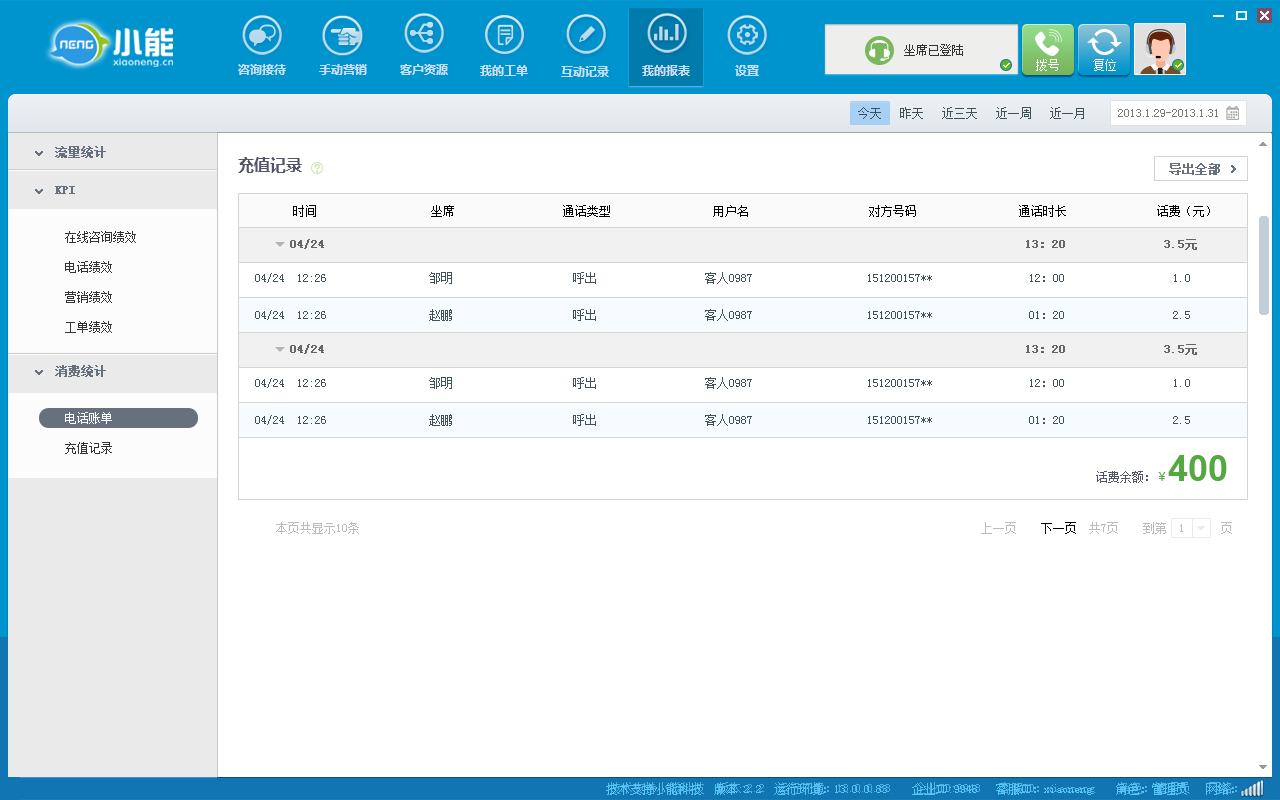
<style>
.page{position:relative;width:1280px;height:800px;background:#ffffff}
.page>*{position:absolute;margin:0}
.t1{font:12px "NSimSun";color:#333333;text-transform:uppercase}
.t2{font:12px "MicrosoftYaHei-Bold";color:#c8dff6}
.t3{font:12px "SimSun";color:#ffffff;text-transform:uppercase}
.t4{font:12px "SimSun";color:#67717d;font-weight:bold}
.t5{font:16px "MicrosoftYaHei-Bold";color:#515567}
.t6{font:12px "SimSun";color:#c9e5ab;text-transform:uppercase;font-weight:bold}
.t7{font:12px "SimSun";color:#000000}
.t8{font:12px/30px "SimSun";color:#333333}
.t9{font:12px "SimSun";color:#666666;font-weight:bold}
.t10{font:12px "SimSun";color:#405159}
.t11{font:12px "SimSun";color:#515567}
.t12{font:12px "MicrosoftYaHei";color:#53a93f}
.t13{font:36px "Arial-BoldMT";color:#53a93f}
.t14{font:12px "SimSun";color:#54c7f5}
</style>
<div class="page">
<p class="t1" style="left:904px;top:44px;width:59px;height:12px">坐席已登陆</p>
<p class="t2" style="left:238px;top:64px;width:48px;height:11px">咨询接待</p>
<p class="t2" style="left:319px;top:64px;width:48px;height:11px">手动营销</p>
<p class="t2" style="left:400px;top:64px;width:48px;height:11px">客户资源</p>
<p class="t2" style="left:480px;top:65px;width:48px;height:11px">我的工单</p>
<p class="t2" style="left:642px;top:65px;width:48px;height:11px">我的报表</p>
<p class="t2" style="left:735px;top:65px;width:24px;height:11px">设置</p>
<p class="t3" style="left:1036px;top:59px;width:23px;height:12px">拨号</p>
<p class="t3" style="left:1093px;top:59px;width:23px;height:12px">复位</p>
<p class="t2" style="left:561px;top:66px;width:48px;height:11px">互动记录</p>
<p class="t4" style="left:55px;top:146px;width:51px;height:12px">流量统计</p>
<p class="t4" style="left:55px;top:146px;width:51px;height:12px">流量统计</p>
<p class="t5" style="left:238px;top:157px;width:64px;height:16px">充值记录</p>
<p class="t6" style="left:314px;top:164px;width:6px;height:9px">?</p>
<p class="t4" style="left:1169px;top:163px;width:51px;height:12px">导出全部</p>
<p class="t4" style="left:1169px;top:163px;width:51px;height:12px">导出全部</p>
<p class="t4" style="left:55px;top:186px;width:20px;height:8px">KPI</p>
<p class="t4" style="left:55px;top:186px;width:20px;height:8px">KPI</p>
<p class="t7" style="left:293px;top:205px;width:917px;height:12px">时间                   坐席                  通话类型                 用户名                    对方号码                 通话时长               话费（元）</p>
<p class="t8" style="left:65px;top:231px;width:71px;height:102px">在线咨询绩效<br>电话绩效<br>营销绩效<br>工单绩效</p>
<p class="t8" style="left:65px;top:231px;width:71px;height:102px">在线咨询绩效<br>电话绩效<br>营销绩效<br>工单绩效</p>
<p class="t9" style="left:290px;top:239px;width:907px;height:11px">04/24                                                                                                    13：20              3.5元</p>
<p class="t10" style="left:255px;top:272px;width:935px;height:12px">04/24  12:26                 邹明                    呼出                  客人0987                   151200157**                12：00                  1.0</p>
<p class="t10" style="left:255px;top:309px;width:935px;height:12px">04/24  12:26                 赵鹏                    呼出                  客人0987                   151200157**                01：20                  2.5</p>
<p class="t9" style="left:290px;top:344px;width:907px;height:11px">04/24                                                                                                    13：20              3.5元</p>
<p class="t4" style="left:55px;top:365px;width:51px;height:12px">消费统计</p>
<p class="t10" style="left:255px;top:377px;width:935px;height:12px">04/24  12:26                 邹明                    呼出                  客人0987                   151200157**                12：00                  1.0</p>
<p class="t10" style="left:255px;top:414px;width:935px;height:12px">04/24  12:26                 赵鹏                    呼出                  客人0987                   151200157**                01：20                  2.5</p>
<p class="t11" style="left:1096px;top:455px;width:131px;height:28px">话费余额：<span class="t12">￥</span><span class="t13">400</span></p>
<p class="t14" style="left:606px;top:783px;width:628px;height:12px">技术支持小能科技  版本:2.2  运行环境：13.0.0.83    企业ID:9948   客服ID：xiaoneng    角色：管理员   网络：</p>
</div>
